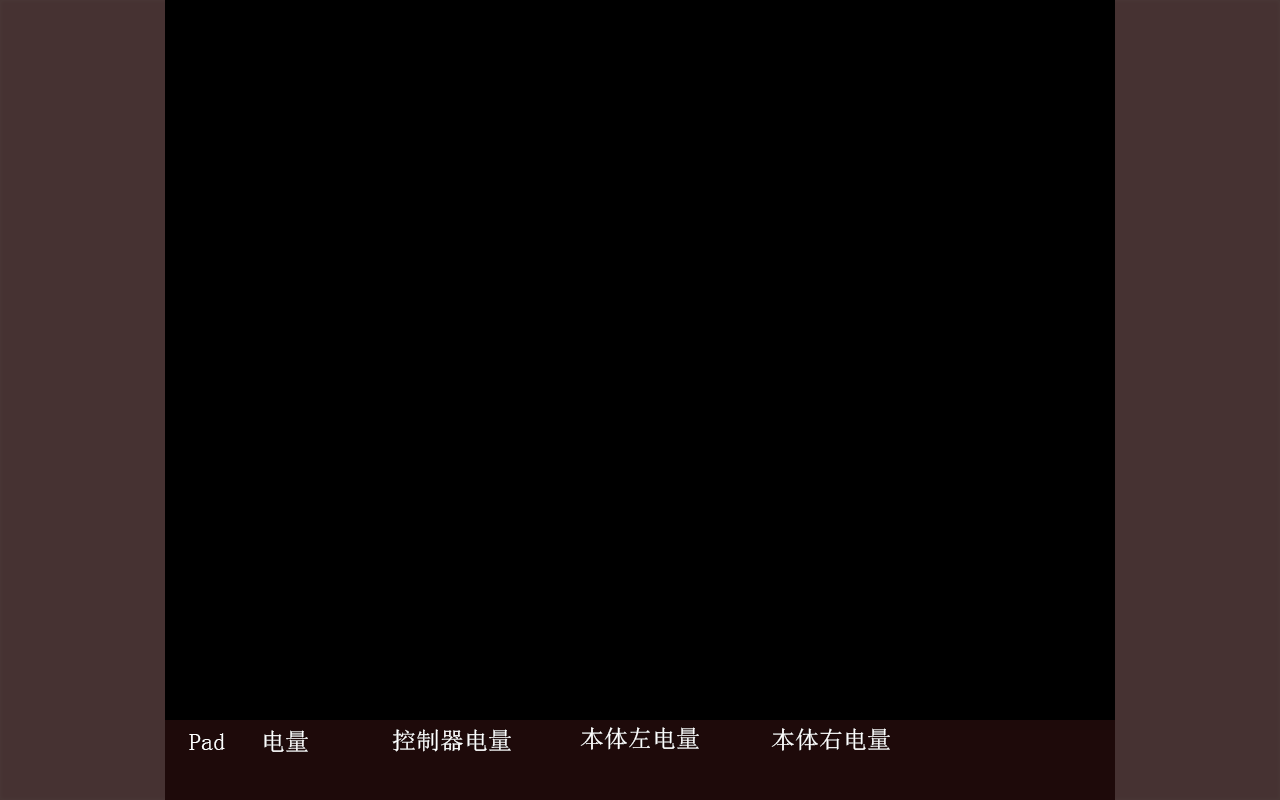
<style>
.page{position:relative;width:1280px;height:800px;background:#000000}
.page>*{position:absolute;margin:0}
.t1{font:24px "SimSun";color:#ffffff}
</style>
<div class="page">
<p class="t1" style="left:189px;top:730px;width:119px;height:22px">Pad   电量</p>
<p class="t1" style="left:392px;top:729px;width:119px;height:23px">控制器电量</p>
<p class="t1" style="left:580px;top:727px;width:119px;height:23px">本体左电量</p>
<p class="t1" style="left:771px;top:728px;width:119px;height:23px">本体右电量</p>
</div>
